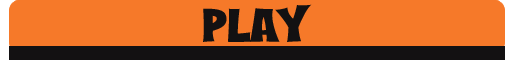
<style>
.page{position:relative;width:512px;height:60px;background:#f67929}
.page>*{position:absolute;margin:0}
.t1{font:48px "SCARYAndSPICYRegular";color:#131112}
</style>
<div class="page">
<p class="t1" style="left:203px;top:4px;width:109px;height:38px">Play</p>
<p class="t1" style="left:203px;top:4px;width:109px;height:38px">Play</p>
</div>
